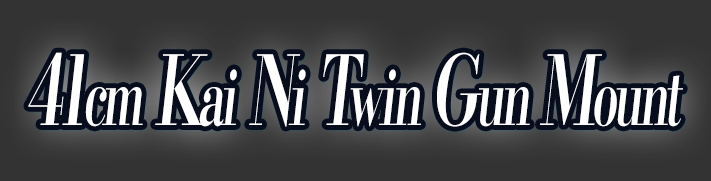
<style>
.page{position:relative;width:711px;height:181px;background:#333333}
.page>*{position:absolute;margin:0}
.t1{font:76.8px "KochoStd-Heavy";letter-spacing:-0.08em;color:#ffffff;font-style:italic;scale:0.62 1}
.t2{font:96px "KochoStd-Heavy";letter-spacing:-0.08em;color:#ffffff;font-style:italic;scale:0.62 1}
</style>
<div class="page">
<p class="t1" style="left:28px;top:52px;width:655px;height:75px"><span class="t2">41</span>cm<span class="t2"> K</span>ai<span class="t2"> N</span>i<span class="t2"> T</span>win <span class="t2">G</span>un <span class="t2">M</span>ount</p>
</div>
